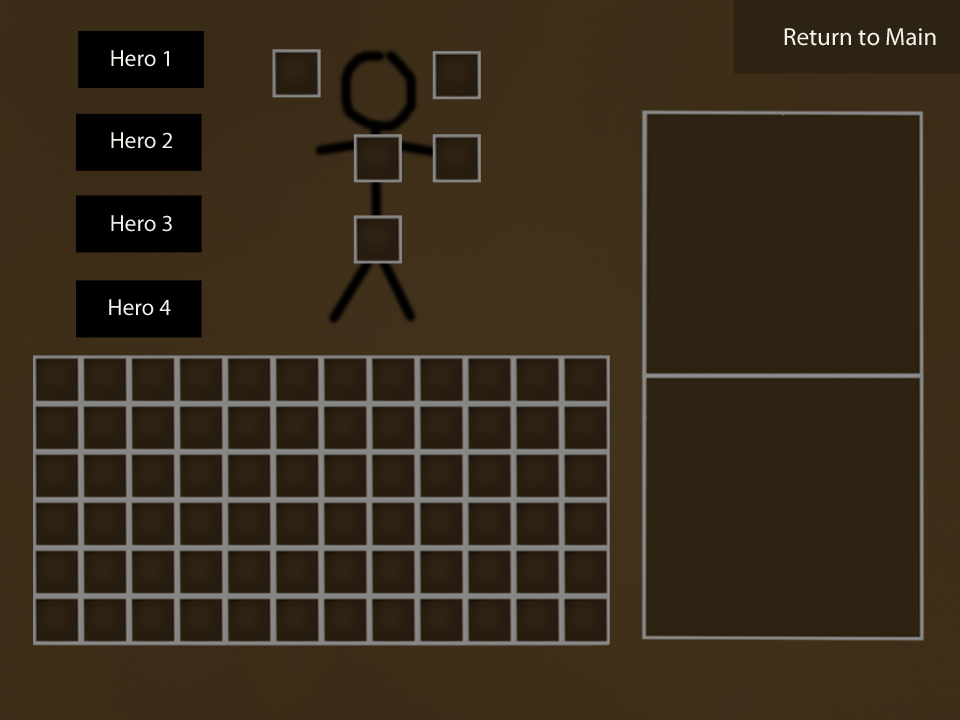
<style>
.page{position:relative;width:960px;height:720px}
.page>*{position:absolute;margin:0}
.t1{font:24.9px "MyriadPro-Regular";color:#f5f2ed}
.t2{font:23.2px "MyriadPro-Regular";color:#f5f2ed}
</style>
<div class="page">
<p class="t1" style="left:784px;top:28px;width:152px;height:18px">Return to Main</p>
<p class="t2" style="left:111px;top:50px;width:58px;height:17px">Hero 1</p>
<p class="t2" style="left:111px;top:132px;width:61px;height:17px">Hero 2</p>
<p class="t2" style="left:111px;top:215px;width:61px;height:17px">Hero 3</p>
<p class="t2" style="left:109px;top:299px;width:62px;height:17px">Hero 4</p>
</div>
